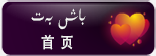
<style>
.page{position:relative;width:156px;height:56px}
.page>*{position:absolute;margin:0}
.t1{font:24.5px "UKIJKesme";color:#f2f2f2;scale:0.86 1}
.t2{font:15.3px "AdobeHeitiStd-Regular";color:#f2f2f2;scale:0.86 1}
</style>
<div class="page">
<p class="t1" style="left:31px;top:8px;width:55px;height:22px">باش بەت</p>
<p class="t2" style="left:41px;top:34px;width:32px;height:16px">首  页</p>
</div>
